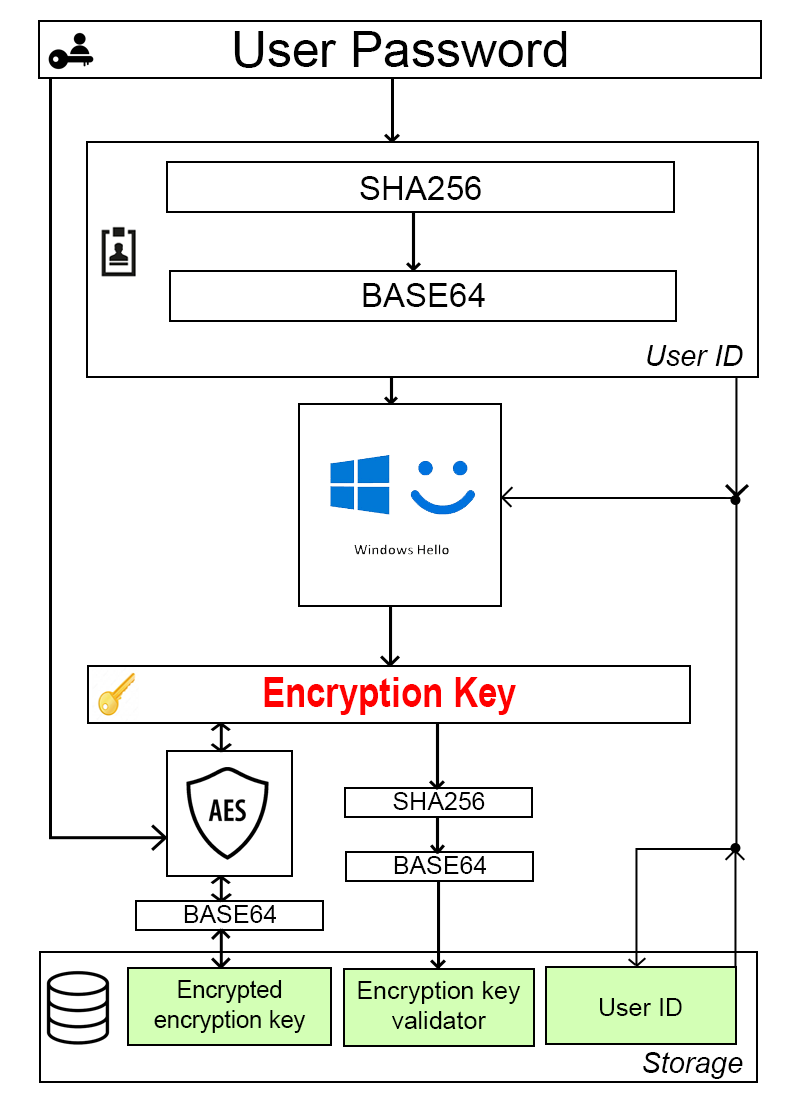
<style>
.page{position:relative;width:800px;height:1104px;background:#ffffff}
.page>*{position:absolute;margin:0}
.t1{font:50px "ArialMT";color:#000000}
.t2{font:33.3px "ArialMT";color:#000000}
.t3{font:29.2px "Arial-ItalicMT";color:#000000}
.t4{font:41.7px "Arial-BoldMT";color:#ff0000;scale:0.83 1}
.t5{font:25px "ArialMT";color:#000000}
.t6{font:25px "ArialMT";color:#000000;scale:0.94 1}
</style>
<div class="page">
<p class="t1" style="left:234px;top:31px;width:333px;height:37px">User Password</p>
<p class="t2" style="left:360px;top:176px;width:121px;height:24px">SHA256</p>
<p class="t2" style="left:363px;top:283px;width:122px;height:24px">BASE64</p>
<p class="t3" style="left:647px;top:345px;width:96px;height:21px">User ID</p>
<p class="t4" style="left:264px;top:677px;width:252px;height:38px">Encryption Key</p>
<p class="t5" style="left:393px;top:792px;width:92px;height:18px">SHA256</p>
<p class="t5" style="left:394px;top:856px;width:92px;height:18px">BASE64</p>
<p class="t5" style="left:184px;top:905px;width:92px;height:18px">BASE64</p>
<p class="t6" style="left:154px;top:980px;width:152px;height:53px;text-align:center">Encrypted encryption key</p>
<p class="t5" style="left:358px;top:981px;width:163px;height:48px;text-align:center">Encryption key validator</p>
<p class="t5" style="left:600px;top:998px;width:82px;height:18px">User ID</p>
<p class="t3" style="left:643px;top:1052px;width:100px;height:27px">Storage</p>
</div>
